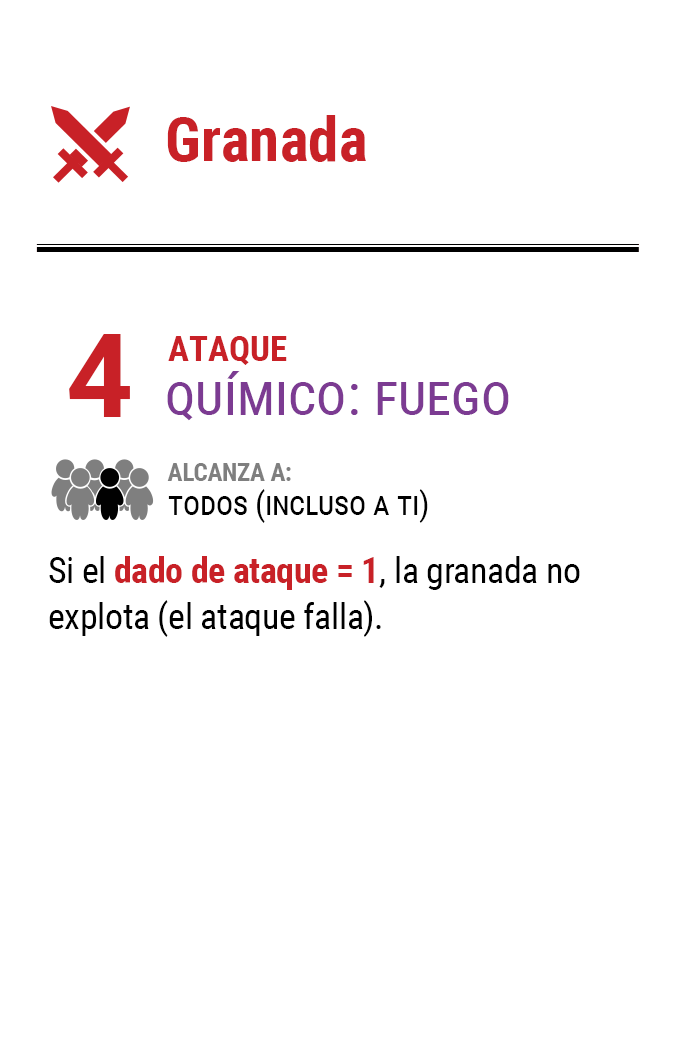
<style>
.page{position:relative;width:675px;height:1050px;background:#ffffff}
.page>*{position:absolute;margin:0}
.t1{font:61.2px "RobotoCondensed-Bold";color:#c82127}
.t2{font:116.7px "Roboto-Bold";letter-spacing:-0.16em;color:#c82127}
.t3{font:35px "RobotoCondensed-Bold";color:#c82127}
.t4{font:58.3px "RobotoCondensed-Regular";color:#7c3b92;font-variant:small-caps}
.t5{font:33.3px/33.3px "RobotoCondensed-Regular";letter-spacing:-0.01em;color:#000000;font-variant:small-caps}
.t6{font:25px/33.3px "RobotoCondensed-Bold";letter-spacing:-0.01em;color:#7f7f7f}
.t7{font:35.8px/45.8px "RobotoCondensed-Regular";letter-spacing:-0.01em;color:#000000}
.t8{font:35.8px/45.8px "RobotoCondensed-Bold";letter-spacing:-0.01em;color:#c82127}
</style>
<div class="page">
<p class="t1" style="left:167px;top:115px;width:199px;height:47px">Granada</p>
<p class="t2" style="left:69px;top:334px;width:61px;height:83px">4</p>
<p class="t3" style="left:168px;top:336px;width:119px;height:29px">ATAQUE</p>
<p class="t4" style="left:167px;top:371px;width:342px;height:50px">químico: fuego</p>
<p class="t5" style="left:167px;top:463px;width:261px;height:60px"><span class="t6">ALCANZA A:<br></span>todos (incluso a ti)</p>
<p class="t7" style="left:49px;top:556px;width:531px;height:81px">Si el <span class="t8">dado de ataque = 1</span>, la granada no explota (el ataque falla).</p>
</div>
